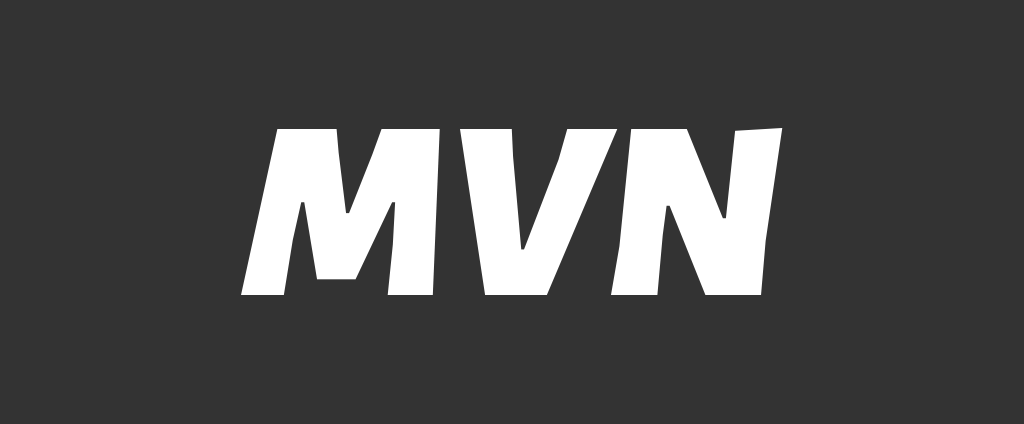
<style>
.page{position:relative;width:1024px;height:424px;background:#333333}
.page>*{position:absolute;margin:0}
.t1{font:256px "AlegreyaSansSC-BlackItalic";color:#ffffff}
</style>
<div class="page">
<p class="t1" style="left:241px;top:128px;width:542px;height:167px">MVN</p>
</div>
